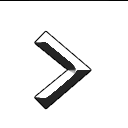
<style>
.page{position:relative;width:128px;height:128px;background:#ffffff}
.page>*{position:absolute;margin:0}
.t1{font:120px "GyeonggiTitleV"}
</style>
<div class="page">
<p class="t1" style="left:35px;top:30px;width:56px;height:78px">&gt;</p>
</div>
